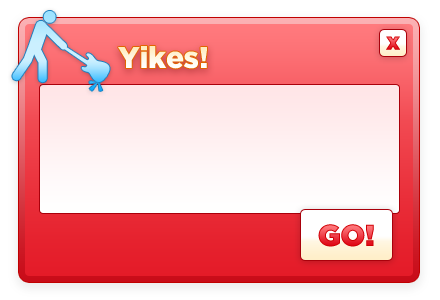
<style>
.page{position:relative;width:440px;height:300px}
.page>*{position:absolute;margin:0}
.t1{font:24px "Gotham-Black"}
.t2{font:30px "Gotham-Black";letter-spacing:-0.01em}
.t3{font:30px "Gotham-Ultra"}
</style>
<div class="page">
<p class="t1" style="left:386px;top:36px;width:14px;height:14px">x</p>
<p class="t2" style="left:118px;top:46px;width:89px;height:23px">Yikes!</p>
<p class="t3" style="left:318px;top:224px;width:56px;height:23px">GO!</p>
</div>
